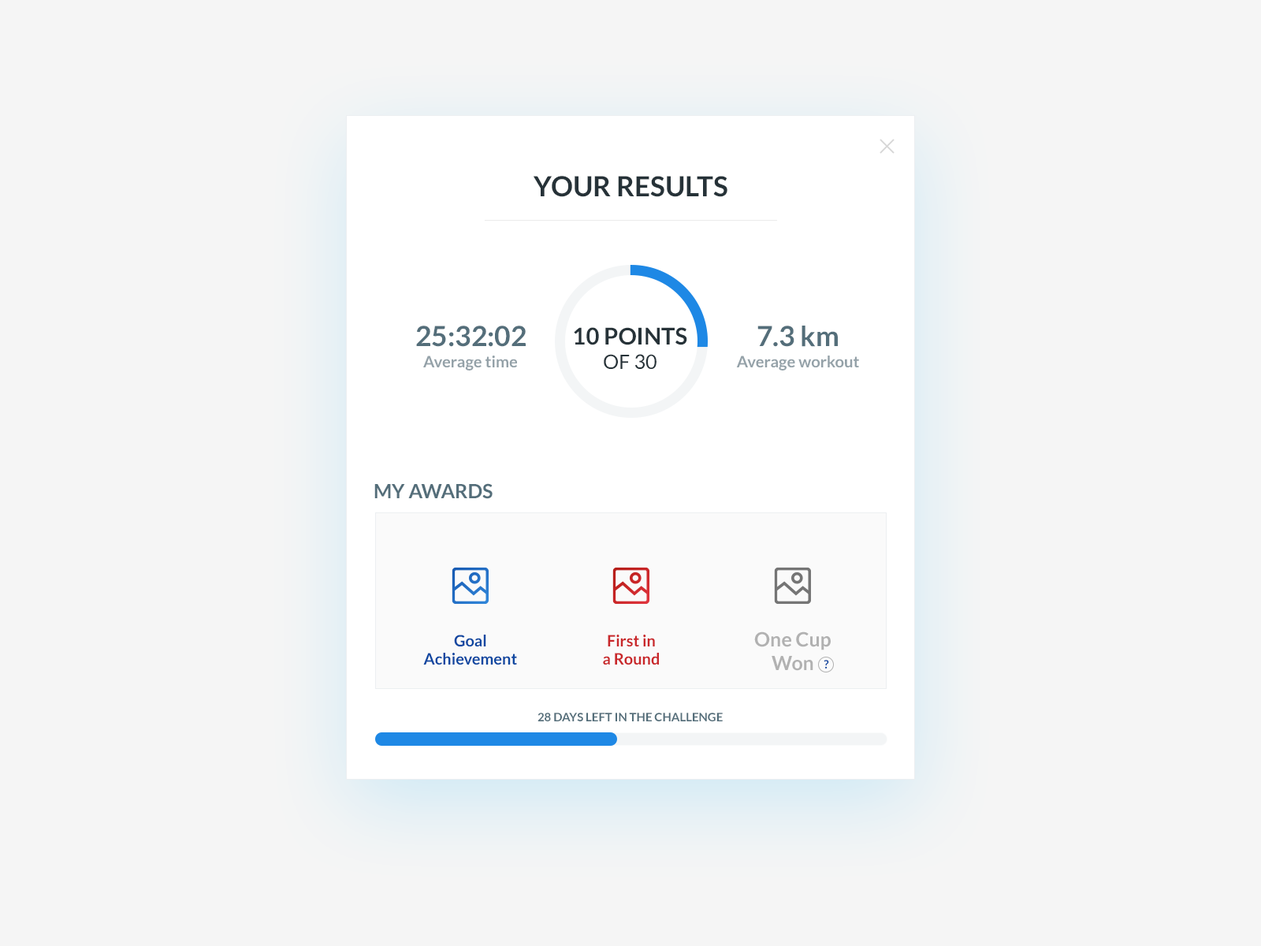
<style>
.page{position:relative;width:1261px;height:946px;background:#f5f5f5}
.page>*{position:absolute;margin:0}
.t1{font:27.6px "Lato-Bold";color:#263238;text-transform:uppercase}
.t2{font:27.9px "Lato-Bold";color:#546e7a}
.t3{font:23.1px/23.9px "Lato-Bold";color:#263238;text-transform:uppercase}
.t4{font:19.9px/23.9px "Lato-Regular";color:#263238;text-transform:uppercase}
.t5{font:15.9px "Lato-Bold";color:#94a1a8}
.t6{font:19.7px "Lato-Bold";color:#546e7a;text-transform:uppercase}
.t7{font:15.8px/18.1px "Lato-Bold";color:#0d47a1}
.t8{font:15.8px/18.1px "Lato-Bold";color:#c9272a}
.t9{font:19.7px/23.6px "Lato-Bold";color:#b1b1b1}
.t10{font:11.8px "Lato-Bold";color:#0d47a1}
.t11{font:11.8px "Lato-Bold";color:#546e7a;text-transform:uppercase}
</style>
<div class="page">
<p class="t1" style="left:534px;top:176px;width:193px;height:21px">Your results</p>
<p class="t2" style="left:416px;top:325px;width:110px;height:22px">25:32:02</p>
<p class="t3" style="left:574px;top:327px;width:113px;height:42px;text-align:center">10 points<br><span class="t4">of 30</span></p>
<p class="t2" style="left:757px;top:325px;width:81px;height:22px">7.3 km</p>
<p class="t5" style="left:423px;top:355px;width:94px;height:15px">Average time</p>
<p class="t5" style="left:736px;top:355px;width:123px;height:15px">Average workout</p>
<p class="t6" style="left:374px;top:483px;width:119px;height:16px">my awards</p>
<p class="t7" style="left:423px;top:634px;width:94px;height:30px;text-align:center">Goal<br>Achievement</p>
<p class="t8" style="left:603px;top:634px;width:56px;height:30px;text-align:center">First in<br>a Round</p>
<p class="t9" style="left:754px;top:631px;width:77px;height:40px;text-align:center">One Cup<br>Won</p>
<p class="t10" style="left:824px;top:660px;width:5px;height:8px">?</p>
<p class="t11" style="left:537px;top:712px;width:186px;height:9px">28 days left in the challenge</p>
</div>
